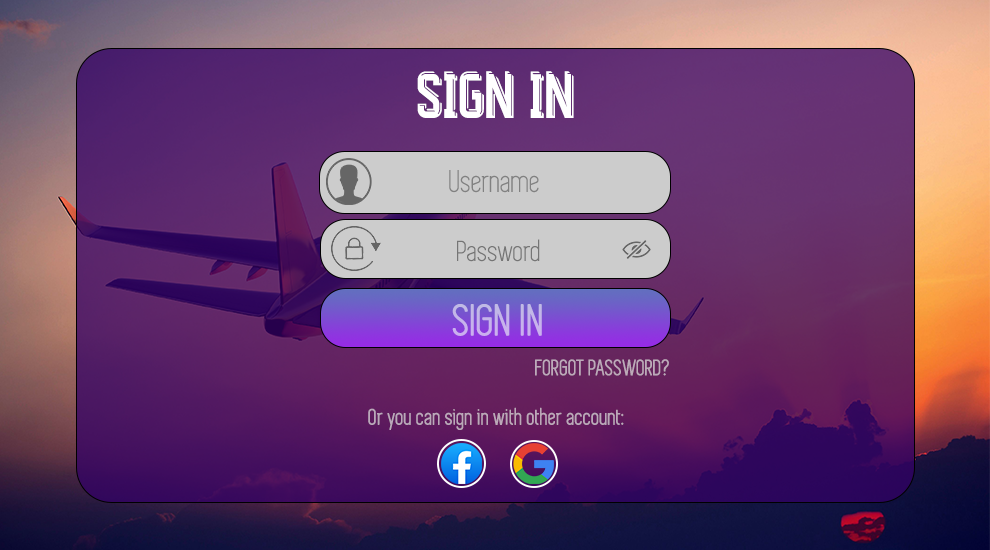
<style>
.page{position:relative;width:990px;height:550px}
.page>*{position:absolute;margin:0}
.t1{font:69px "Real-Madrid-17-18";color:#ffffff}
.t2{font:32.1px "iCielSimplifica";color:#818181}
.t3{font:29.7px "iCielSimplifica";color:#757575;scale:1.04 1}
.t4{font:44.6px "iCielSimplifica";color:#c5b4ea;font-weight:bold;scale:1.04 1}
.t5{font:22.4px "iCielSimplifica";color:#bdaaba;font-weight:bold}
.t6{font:22.6px "iCielSimplifica";color:#bba8b9;font-weight:bold}
</style>
<div class="page">
<p class="t1" style="left:417px;top:71px;width:157px;height:47px">SIGN IN</p>
<p class="t2" style="left:449px;top:170px;width:90px;height:23px">Username</p>
<p class="t3" style="left:457px;top:239px;width:83px;height:23px">Password</p>
<p class="t4" style="left:452px;top:304px;width:90px;height:32px">SIGN IN</p>
<p class="t5" style="left:535px;top:359px;width:134px;height:17px">FORGOT PASSWORD?</p>
<p class="t6" style="left:368px;top:407px;width:256px;height:23px">Or you can sign in with other account:</p>
</div>
